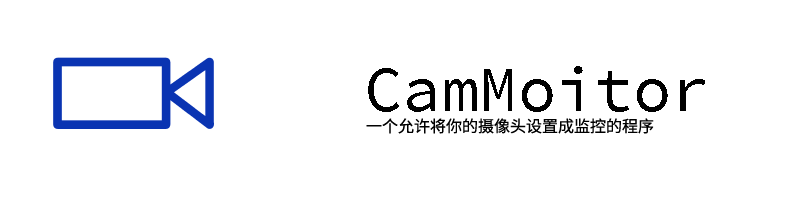
<style>
.page{position:relative;width:800px;height:200px;background:#ffffff}
.page>*{position:absolute;margin:0}
.t1{font:64px "SourceCodePro-Regular";color:#000000}
.t2{font:16px "SourceHanSansCN-Regular";color:#000000}
</style>
<div class="page">
<p class="t1" style="left:368px;top:66px;width:337px;height:46px">CamMoitor</p>
<p class="t2" style="left:366px;top:118px;width:288px;height:16px">一个允许将你的摄像头设置成监控的程序</p>
</div>
